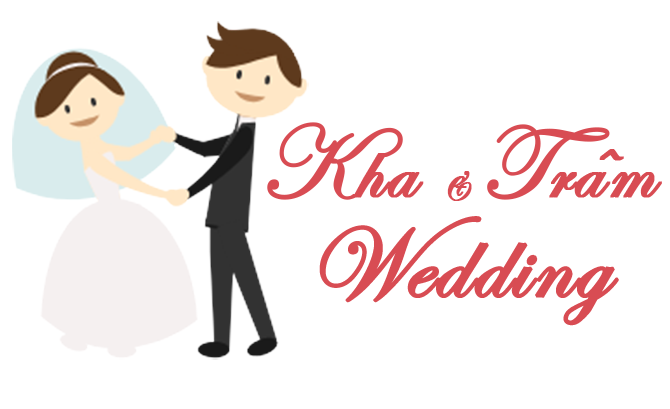
<style>
.page{position:relative;width:670px;height:409px;background:#ffffff}
.page>*{position:absolute;margin:0}
.t1{font:100px "VNIA5BoldOblique";color:#d84c53;font-weight:bold}
.t2{font:120px "VNIA5BoldOblique";color:#d84c53;font-weight:bold}
.t3{font:50px "VNIA5BoldOblique";color:#d84c53;font-weight:bold}
.t4{font:100px "VNI13JackieO";color:#d84c53;font-weight:bold}
</style>
<div class="page">
<p class="t1" style="left:267px;top:122px;width:395px;height:79px"><span class="t2">K</span>ha <span class="t3">&amp; </span><span class="t2">T</span>ra<span class="t4">â</span>m</p>
<p class="t2" style="left:319px;top:216px;width:300px;height:110px">Wedding</p>
</div>
